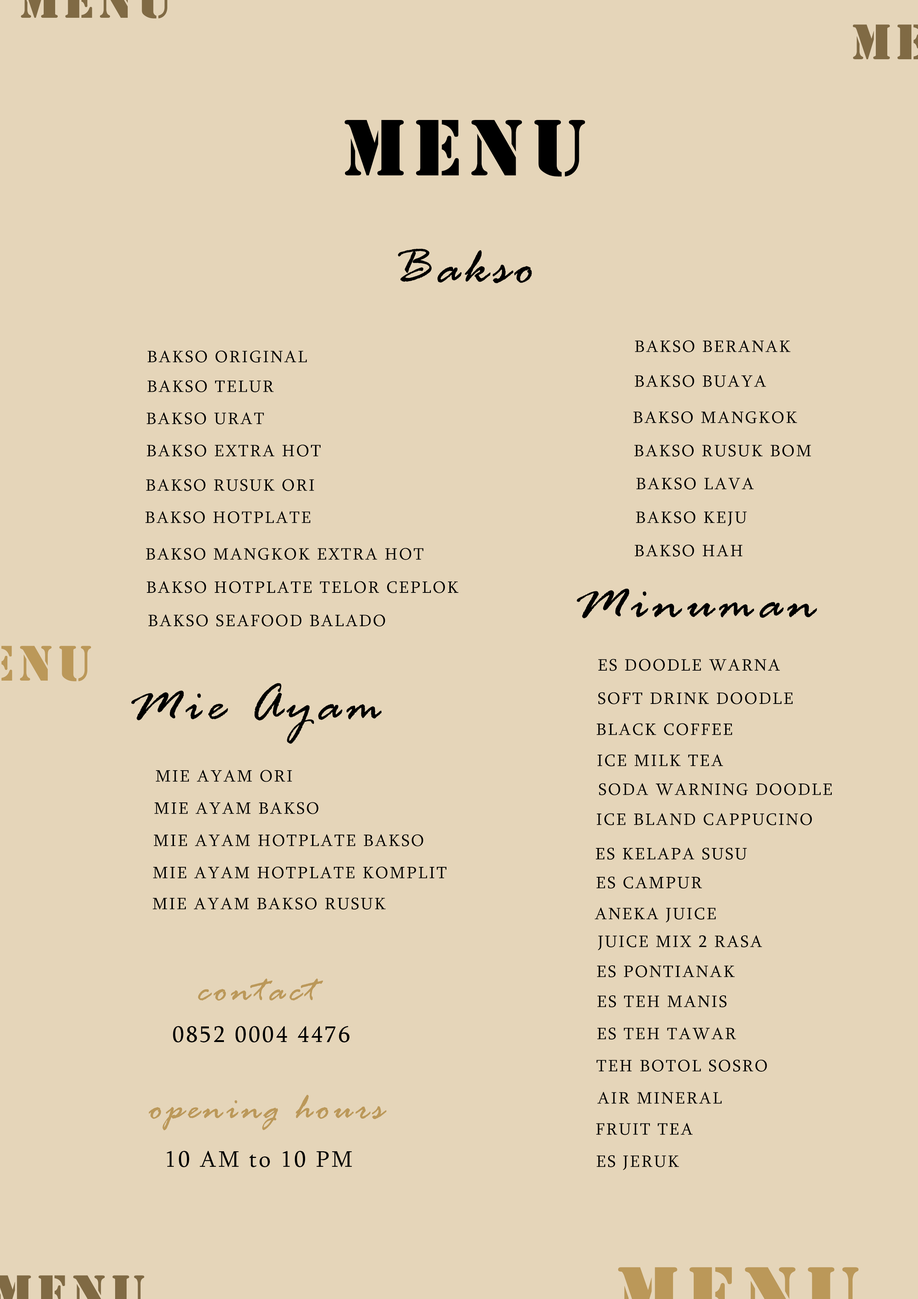
<style>
.page{position:relative;width:918px;height:1299px;background:#e5d5b9}
.page>*{position:absolute;margin:0}
.t1{font:74px "StencilStd";letter-spacing:0.09em;color:#000000}
.t2{font:55.5px "RageItalic";letter-spacing:0.09em;color:#000000}
.t3{font:17px "Sylfaen";letter-spacing:0.09em;color:#000000}
.t4{font:38.6px "RageItalic";letter-spacing:0.09em;color:#bb9859}
.t5{font:23.1px "Sylfaen";letter-spacing:0.09em;color:#000000}
</style>
<div class="page">
<p class="t1" style="left:345px;top:120px;width:240px;height:57px">MENU</p>
<p class="t2" style="left:398px;top:248px;width:134px;height:35px">Bakso</p>
<p class="t3" style="left:635px;top:340px;width:156px;height:12px">BAKSO BERANAK</p>
<p class="t3" style="left:147px;top:350px;width:160px;height:12px">BAKSO ORIGINAL</p>
<p class="t3" style="left:635px;top:375px;width:131px;height:12px">BAKSO BUAYA</p>
<p class="t3" style="left:147px;top:380px;width:127px;height:12px">BAKSO TELUR</p>
<p class="t3" style="left:147px;top:412px;width:117px;height:12px">BAKSO URAT</p>
<p class="t3" style="left:633px;top:411px;width:164px;height:12px">BAKSO MANGKOK</p>
<p class="t3" style="left:147px;top:444px;width:174px;height:12px">BAKSO EXTRA HOT</p>
<p class="t3" style="left:634px;top:444px;width:177px;height:12px">BAKSO RUSUK BOM</p>
<p class="t3" style="left:146px;top:479px;width:168px;height:12px">BAKSO RUSUK ORI</p>
<p class="t3" style="left:636px;top:477px;width:118px;height:12px">BAKSO LAVA</p>
<p class="t3" style="left:145px;top:511px;width:166px;height:12px">BAKSO HOTPLATE</p>
<p class="t3" style="left:636px;top:511px;width:111px;height:15px">BAKSO KEJU</p>
<p class="t3" style="left:635px;top:544px;width:108px;height:12px">BAKSO HAH</p>
<p class="t3" style="left:146px;top:548px;width:278px;height:12px">BAKSO MANGKOK EXTRA HOT</p>
<p class="t3" style="left:147px;top:581px;width:312px;height:12px">BAKSO HOTPLATE TELOR CEPLOK</p>
<p class="t2" style="left:577px;top:588px;width:240px;height:30px">Minuman</p>
<p class="t3" style="left:148px;top:614px;width:237px;height:12px">BAKSO SEAFOOD BALADO</p>
<p class="t3" style="left:598px;top:659px;width:182px;height:12px">ES DOODLE WARNA</p>
<p class="t2" style="left:131px;top:683px;width:251px;height:61px">Mie Ayam</p>
<p class="t3" style="left:598px;top:692px;width:195px;height:12px">SOFT DRINK DOODLE</p>
<p class="t3" style="left:597px;top:723px;width:135px;height:12px">BLACK COFFEE</p>
<p class="t3" style="left:598px;top:754px;width:125px;height:12px">ICE MILK TEA</p>
<p class="t3" style="left:156px;top:770px;width:136px;height:12px">MIE AYAM ORI</p>
<p class="t3" style="left:599px;top:783px;width:233px;height:12px">SODA WARNING DOODLE</p>
<p class="t3" style="left:154px;top:802px;width:164px;height:12px">MIE AYAM BAKSO</p>
<p class="t3" style="left:597px;top:813px;width:215px;height:12px">ICE BLAND CAPPUCINO</p>
<p class="t3" style="left:154px;top:834px;width:270px;height:12px">MIE AYAM HOTPLATE BAKSO</p>
<p class="t3" style="left:596px;top:847px;width:151px;height:13px">ES KELAPA SUSU</p>
<p class="t3" style="left:153px;top:866px;width:293px;height:13px">MIE AYAM HOTPLATE KOMPLIT</p>
<p class="t3" style="left:596px;top:876px;width:106px;height:13px">ES CAMPUR</p>
<p class="t3" style="left:153px;top:897px;width:233px;height:13px">MIE AYAM BAKSO RUSUK</p>
<p class="t3" style="left:595px;top:907px;width:121px;height:15px">ANEKA JUICE</p>
<p class="t3" style="left:598px;top:935px;width:164px;height:15px">JUICE MIX 2 RASA</p>
<p class="t3" style="left:597px;top:965px;width:138px;height:12px">ES PONTIANAK</p>
<p class="t4" style="left:198px;top:978px;width:125px;height:23px">contact</p>
<p class="t3" style="left:598px;top:995px;width:129px;height:12px">ES TEH MANIS</p>
<p class="t5" style="left:173px;top:1026px;width:176px;height:16px">0852 0004 4476</p>
<p class="t3" style="left:597px;top:1027px;width:139px;height:13px">ES TEH TAWAR</p>
<p class="t3" style="left:596px;top:1059px;width:171px;height:12px">TEH BOTOL SOSRO</p>
<p class="t4" style="left:149px;top:1094px;width:238px;height:36px">opening hours</p>
<p class="t3" style="left:597px;top:1091px;width:125px;height:13px">AIR MINERAL</p>
<p class="t3" style="left:596px;top:1123px;width:97px;height:12px">FRUIT TEA</p>
<p class="t5" style="left:167px;top:1151px;width:185px;height:16px">10 AM to 10 PM</p>
<p class="t3" style="left:597px;top:1155px;width:82px;height:15px">ES JERUK</p>
</div>
